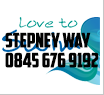
<style>
.page{position:relative;width:104px;height:95px;background:#ffffff}
.page>*{position:absolute;margin:0}
.t1{font:20px/20px "AmericanCaptain";color:#020202}
</style>
<div class="page">
<p class="t1" style="left:5px;top:32px;width:94px;height:36px">Stepney Way<br>0845 676 9192</p>
</div>
